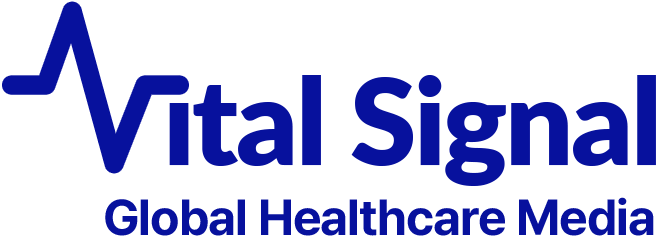
<style>
.page{position:relative;width:662px;height:240px;background:#ffffff}
.page>*{position:absolute;margin:0}
.t1{font:120px "Lato-Black";letter-spacing:-0.02em;color:#07119d}
.t2{font:50px "Pretendard-Bold";letter-spacing:-0.02em;color:#07119d}
</style>
<div class="page">
<p class="t1" style="left:167px;top:75px;width:489px;height:111px">ital Signal</p>
<p class="t2" style="left:105px;top:197px;width:549px;height:39px">Global Healthcare Media</p>
</div>
